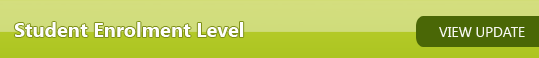
<style>
.page{position:relative;width:539px;height:58px}
.page>*{position:absolute;margin:0}
.t1{font:20px "SegoeUI-Bold";color:#fefefe}
.t2{font:14px "SegoeUI";color:#f6f7f1}
</style>
<div class="page">
<p class="t1" style="left:14px;top:22px;width:230px;height:15px">Student Enrolment Level</p>
<p class="t2" style="left:439px;top:27px;width:86px;height:10px">VIEW UPDATE</p>
</div>
